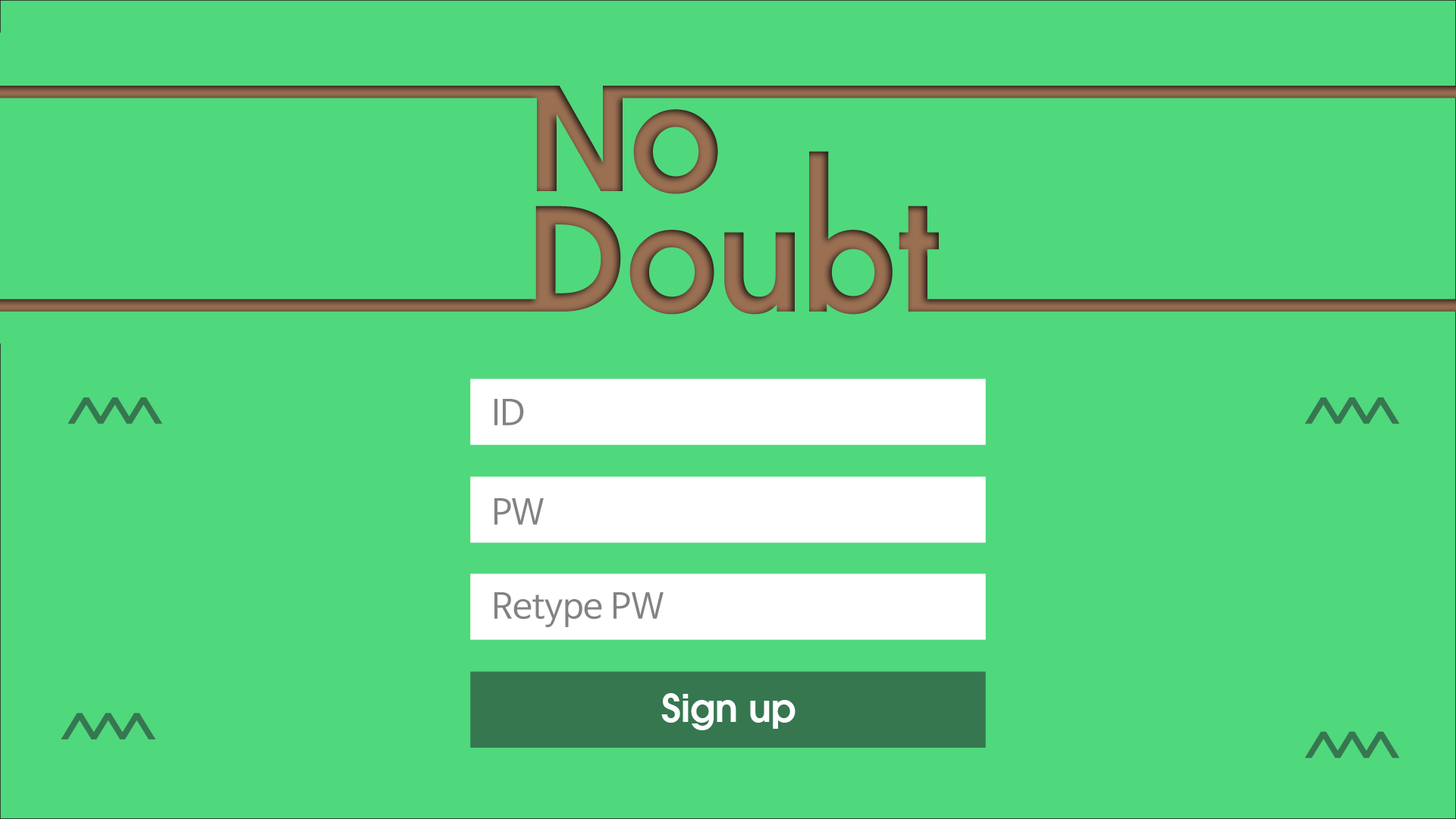
<style>
.page{position:relative;width:1456px;height:819px;background:#50d87d}
.page>*{position:absolute;margin:0}
.t1{font:34.8px "NanumBarunGothicOTF";color:#828282}
.t2{font:37.9px "AvantGarde-Demi";color:#ffffff}
</style>
<div class="page">
<p class="t1" style="left:494px;top:399px;width:30px;height:26px">ID</p>
<p class="t1" style="left:494px;top:498px;width:50px;height:27px">PW</p>
<p class="t1" style="left:494px;top:592px;width:170px;height:35px">Retype PW</p>
<p class="t2" style="left:661px;top:693px;width:134px;height:37px">Sign up</p>
</div>
